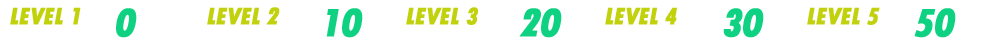
<style>
.page{position:relative;width:1000px;height:50px;background:#ffffff}
.page>*{position:absolute;margin:0}
.t1{font:24.9px "TwCenMT-CondensedExtraBold";letter-spacing:-0.02em;color:#c1d10b;text-transform:uppercase;font-weight:bold;font-style:italic}
.t2{font:41.5px "TwCenMT-CondensedExtraBold";letter-spacing:-0.02em;color:#0ed181;text-transform:uppercase;font-weight:bold;font-style:italic}
</style>
<div class="page">
<p class="t1" style="left:10px;top:7px;width:71px;height:18px">Level 1</p>
<p class="t2" style="left:116px;top:8px;width:21px;height:30px">0</p>
<p class="t1" style="left:207px;top:7px;width:73px;height:18px">Level 2</p>
<p class="t2" style="left:326px;top:8px;width:37px;height:30px">10</p>
<p class="t1" style="left:406px;top:7px;width:72px;height:18px">Level 3</p>
<p class="t2" style="left:519px;top:8px;width:43px;height:30px">20</p>
<p class="t1" style="left:605px;top:7px;width:72px;height:18px">Level 4</p>
<p class="t2" style="left:723px;top:8px;width:41px;height:30px">30</p>
<p class="t1" style="left:807px;top:7px;width:73px;height:18px">Level 5</p>
<p class="t2" style="left:914px;top:8px;width:42px;height:30px">50</p>
</div>
